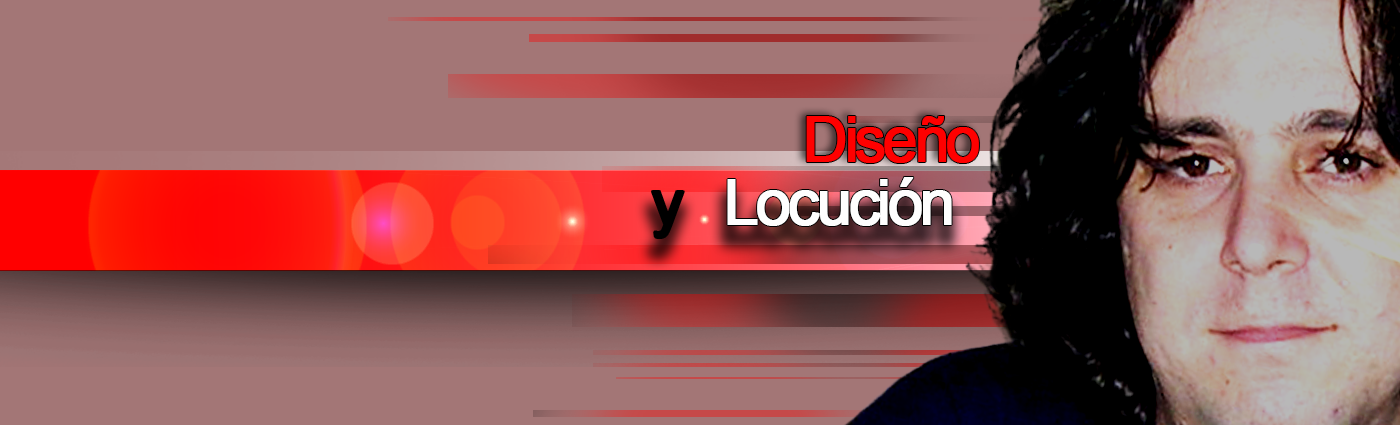
<style>
.page{position:relative;width:1400px;height:425px;background:#a37676}
.page>*{position:absolute;margin:0}
.t1{font:61.8px "ArialMT";letter-spacing:-0.075em;color:#ff0000;font-weight:bold}
.t2{font:63.2px "ArialMT";letter-spacing:-0.075em;color:#fefefe;font-weight:bold}
.t3{font:63.2px "ArialMT";letter-spacing:-0.075em;color:#000000;font-weight:bold}
</style>
<div class="page">
<p class="t1" style="left:806px;top:116px;width:173px;height:47px">Diseño</p>
<p class="t2" style="left:652px;top:177px;width:300px;height:61px"><span class="t3">y</span>   Locución</p>
</div>
